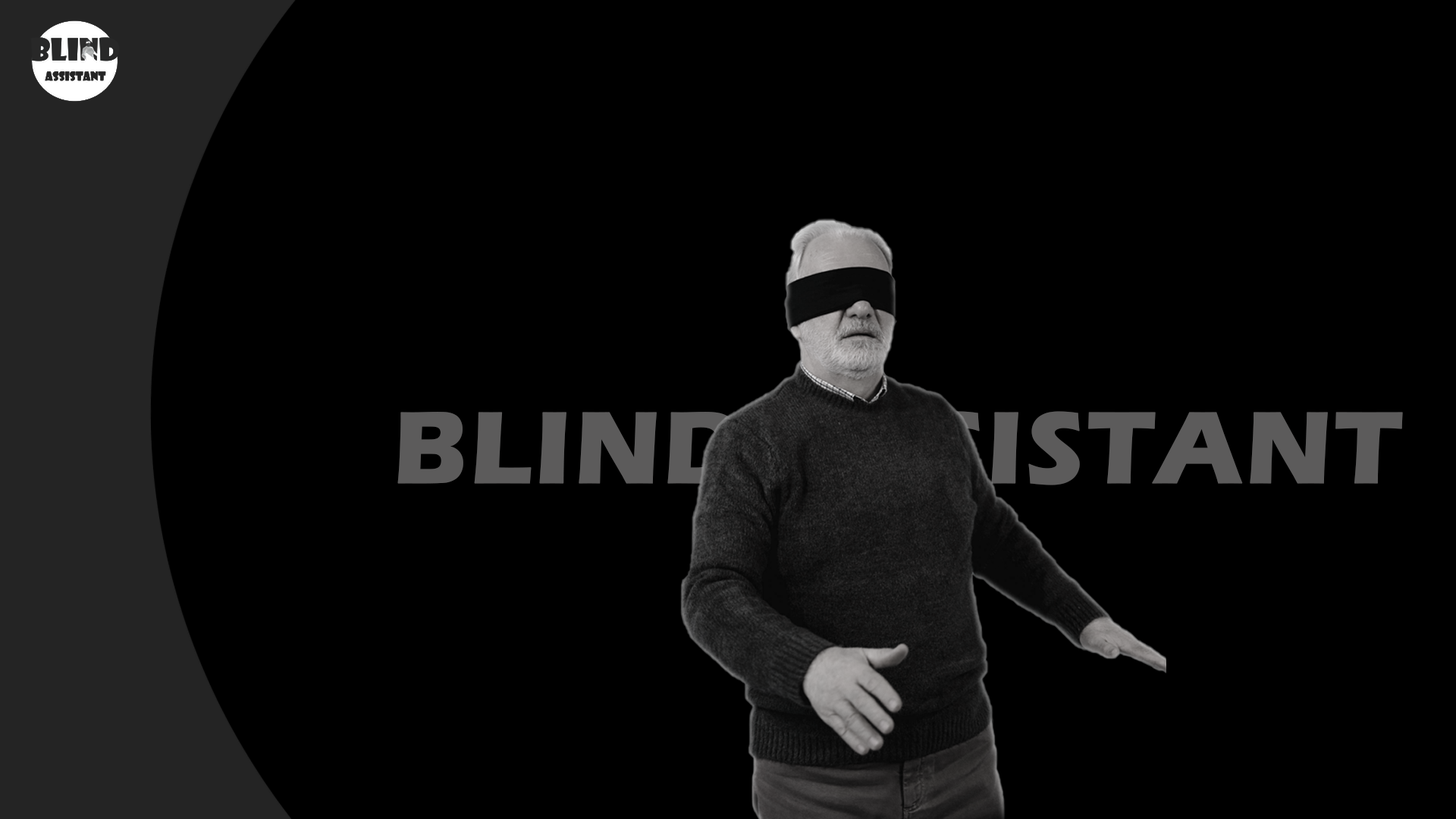
<style>
.page{position:relative;width:1456px;height:819px;background:#000000}
.page>*{position:absolute;margin:0}
.t1{font:105.2px "ErasITC-Bold";color:#5c5b5b;font-weight:bold}
</style>
<div class="page">
<p class="t1" style="left:397px;top:411px;width:1006px;height:74px">BLIND ASSISTANT</p>
</div>
